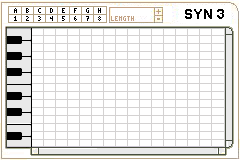
<style>
.page{position:relative;width:240px;height:160px;background:#ffffff}
.page>*{position:absolute;margin:0}
.t1{font:7px "Terminal";color:#000000}
.t2{font:7px "Terminal";color:#c19f83}
.t3{font:14px "Arial-BoldMT";color:#000000}
</style>
<div class="page">
<p class="t1" style="left:14px;top:8px;width:87px;height:5px">A  B  C  D  E  F  G  H</p>
<p class="t1" style="left:14px;top:16px;width:87px;height:5px">1  2  3  4  5  6  7  8</p>
<p class="t2" style="left:111px;top:16px;width:23px;height:5px">LENGTH</p>
<p class="t3" style="left:185px;top:9px;width:39px;height:10px">SYN 3</p>
</div>
